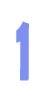
<style>
.page{position:relative;width:50px;height:110px;background:#ffffff}
.page>*{position:absolute;margin:0}
.t1{font:96px "BerlinSansFBDemi-Bold";color:#7f90f4;scale:0.5 1}
</style>
<div class="page">
<p class="t1" style="left:16px;top:21px;width:13px;height:60px">1</p>
</div>
